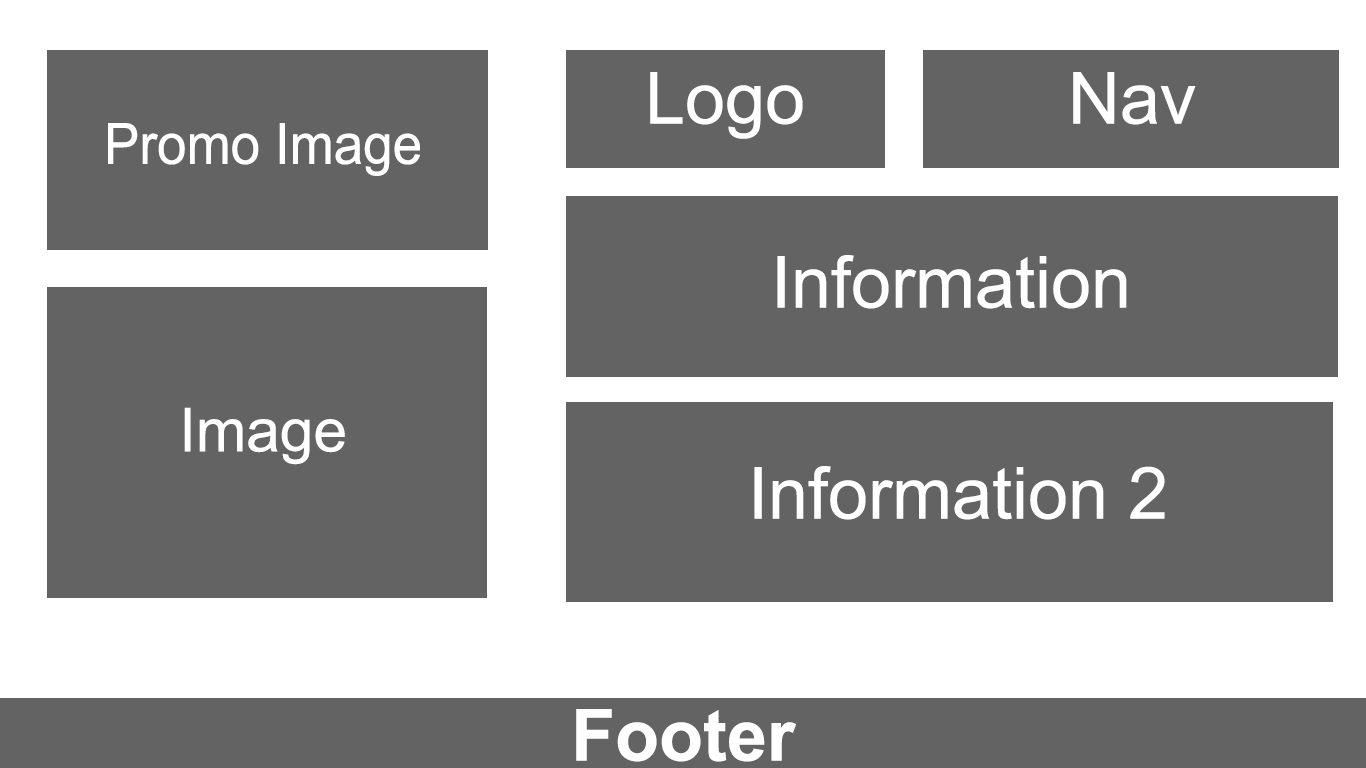
<style>
.page{position:relative;width:1366px;height:768px;background:#636363}
.page>*{position:absolute;margin:0}
.t1{font:72px "ArialMT";color:#ffffff}
.t2{font:56.9px "ArialMT";color:#ffffff;scale:0.93 1}
.t3{font:60.5px "ArialMT";color:#ffffff}
.t4{font:72px "Arial-BoldMT";color:#ffffff}
</style>
<div class="page">
<p class="t1" style="left:650px;top:72px;width:153px;height:67px">Logo</p>
<p class="t1" style="left:1073px;top:72px;width:123px;height:53px">Nav</p>
<p class="t2" style="left:108px;top:123px;width:312px;height:53px">Promo Image</p>
<p class="t1" style="left:777px;top:255px;width:350px;height:54px">Information</p>
<p class="t3" style="left:184px;top:407px;width:161px;height:58px">Image</p>
<p class="t1" style="left:754px;top:466px;width:411px;height:54px">Information 2</p>
<p class="t4" style="left:576px;top:709px;width:220px;height:53px">Footer</p>
</div>
